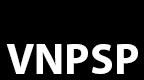
<style>
.page{position:relative;width:144px;height:80px;background:#000000}
.page>*{position:absolute;margin:0}
.t1{font:44px "MyriadPro-Bold";color:#ffffff}
</style>
<div class="page">
<p class="t1" style="left:6px;top:44px;width:132px;height:30px">VNPSP</p>
</div>
